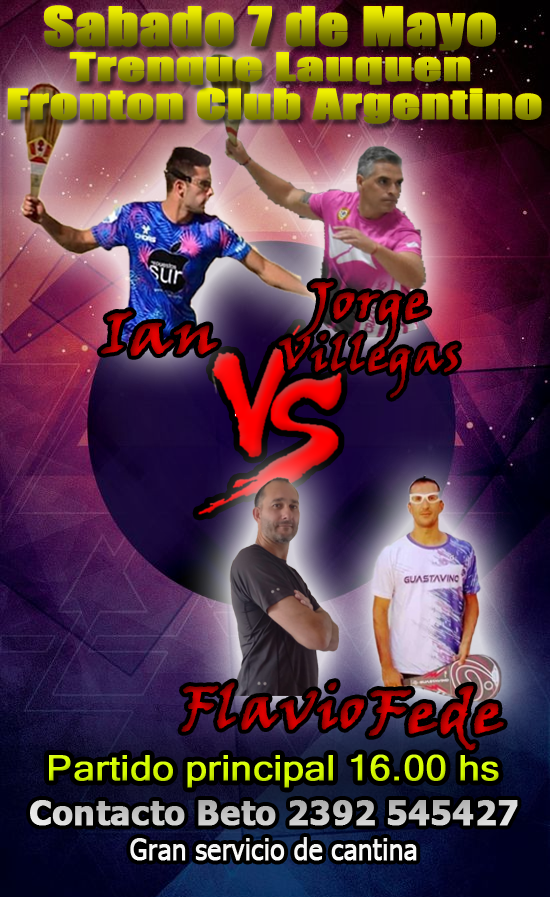
<style>
.page{position:relative;width:550px;height:897px}
.page>*{position:absolute;margin:0}
.t1{font:48.8px "Impact";font-weight:bold;scale:1.22 1}
.t2{font:35.7px "Impact";font-weight:bold;scale:1.51 1}
.t3{font:38px "Impact";font-weight:bold;scale:1.42 1}
.t4{font:47px/48.8px "VinerHandITC";font-weight:bold}
.t5{font:52.8px/8.8px "VinerHandITC";font-weight:bold}
.t6{font:58.7px "VinerHandITC";font-weight:bold;scale:1.15 1}
.t7{font:58.7px "VinerHandITC";font-weight:bold}
.t8{font:34.7px "MicrosoftSansSerif";color:#d3f900;font-weight:bold;scale:1.09 1}
.t9{font:34.4px "Tahoma-Bold";color:#c7c7c7;font-weight:bold;scale:0.97 1}
.t10{font:29.9px "Tahoma";color:#ffffff;font-weight:bold;scale:0.85 1}
</style>
<div class="page">
<p class="t1" style="left:43px;top:5px;width:453px;height:46px">Sabado 7 de Mayo</p>
<p class="t2" style="left:69px;top:52px;width:402px;height:33px">Trenque Lauquen</p>
<p class="t3" style="left:7px;top:87px;width:535px;height:37px">Fronton Club Argentino</p>
<p class="t4" style="left:278px;top:281px;width:180px;height:117px;text-align:center"><span class="t5">Jorge<br></span>Villegas</p>
<p class="t6" style="left:101px;top:311px;width:117px;height:45px">Ian</p>
<p class="t7" style="left:181px;top:682px;width:184px;height:50px">Flavio</p>
<p class="t6" style="left:368px;top:685px;width:136px;height:66px">Fede</p>
<p class="t8" style="left:49px;top:754px;width:450px;height:34px">Partido principal 16.00 hs</p>
<p class="t9" style="left:30px;top:800px;width:488px;height:26px">Contacto Beto 2392 545427</p>
<p class="t10" style="left:130px;top:837px;width:287px;height:24px">Gran servicio de cantina</p>
</div>
